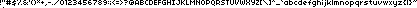
<style>
.page{position:relative;width:417px;height:8px;background:#ffffff}
.page>*{position:absolute;margin:0}
.t1{font:8px "04b03";color:#000000}
</style>
<div class="page">
<p class="t1" style="left:0px;top:0px;width:417px;height:7px">!"#$%&amp;'()*+,-./0123456789:;&lt;=&gt;?@ABCDEFGHIJKLMNOPQRSTUVWXYZ[\]^_`abcdefghijklmnopqrstuvwxyz{|}~</p>
</div>
